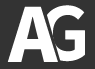
<style>
.page{position:relative;width:95px;height:69px;background:#333333}
.page>*{position:absolute;margin:0}
.t1{font:74.4px "NotoSansCJKjp-Black";letter-spacing:-0.03em;color:#ffffff}
.t2{font:71.8px "NotoSansCJKjp-Bold";letter-spacing:-0.03em;color:#ffffff;font-weight:bold}
</style>
<div class="page">
<p class="t1" style="left:7px;top:6px;width:51px;height:56px">A</p>
<p class="t2" style="left:41px;top:5px;width:44px;height:57px">G</p>
</div>
